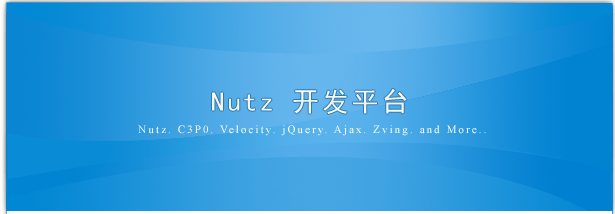
<style>
.page{position:relative;width:615px;height:214px}
.page>*{position:absolute;margin:0}
.t1{font:27px "SimHei";letter-spacing:0.1em;color:#ffffff}
.t2{font:27px "SimSun";letter-spacing:0.1em;color:#ffffff}
.t3{font:11px "TimesNewRomanPSMT";letter-spacing:0.19em;color:#ffffff}
</style>
<div class="page">
<p class="t1" style="left:212px;top:88px;width:195px;height:26px"><span class="t2">      </span>Nutz 开发平台</p>
<p class="t3" style="left:138px;top:125px;width:348px;height:11px">Nutz. C3P0. Velocity. jQuery. Ajax. Zving. and More..</p>
</div>
